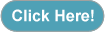
<style>
.page{position:relative;width:105px;height:32px;background:#4fa1b6}
.page>*{position:absolute;margin:0}
.t1{font:16px "Arial-BoldMT";color:#ffffff}
</style>
<div class="page">
<p class="t1" style="left:12px;top:9px;width:82px;height:13px">Click Here!</p>
</div>
